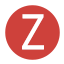
<style>
.page{position:relative;width:64px;height:64px;background:#ffffff}
.page>*{position:absolute;margin:0}
.t1{font:52px "Gidole-Regular";color:#ffffff;font-weight:bold}
</style>
<div class="page">
<p class="t1" style="left:22px;top:14px;width:22px;height:36px">Z</p>
</div>
